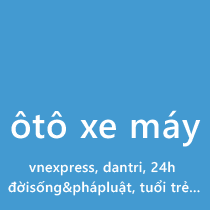
<style>
.page{position:relative;width:210px;height:210px;background:#439ad1}
.page>*{position:absolute;margin:0}
.t1{font:36px "SegoeWP-Semibold";letter-spacing:0.025em;color:#ffffff}
.t2{font:14px "SegoeWP-Semibold";letter-spacing:0.025em;color:#fefefe}
.t3{font:14px "SegoeWP-Semibold";letter-spacing:0.025em;color:#ffffff}
</style>
<div class="page">
<p class="t1" style="left:11px;top:110px;width:190px;height:37px">ôtô xe máy</p>
<p class="t2" style="left:29px;top:161px;width:146px;height:15px">vnexpress, dantri, 24h</p>
<p class="t3" style="left:8px;top:180px;width:192px;height:16px">đờisống&amp;phápluật, tuổi trẻ...</p>
</div>
